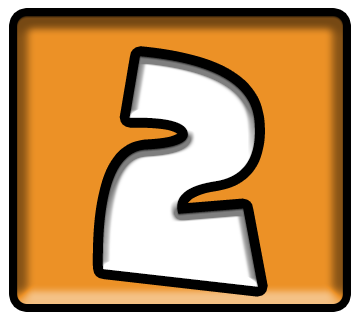
<style>
.page{position:relative;width:360px;height:320px;background:#ec9126}
.page>*{position:absolute;margin:0}
.t1{font:277.9px "Funhouse";color:#ffffff;scale:0.91 1}
</style>
<div class="page">
<p class="t1" style="left:102px;top:56px;width:156px;height:231px">2</p>
</div>
